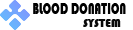
<style>
.page{position:relative;width:133px;height:30px;background:#ffffff}
.page>*{position:absolute;margin:0}
.t1{font:16px "Bauhaus93";color:#000000;scale:0.71 1}
.t2{font:12px "Bauhaus93";color:#090909}
</style>
<div class="page">
<p class="t1" style="left:33px;top:3px;width:93px;height:11px">BLOOD DONATION</p>
<p class="t2" style="left:83px;top:19px;width:38px;height:8px">SYSTEM</p>
</div>
